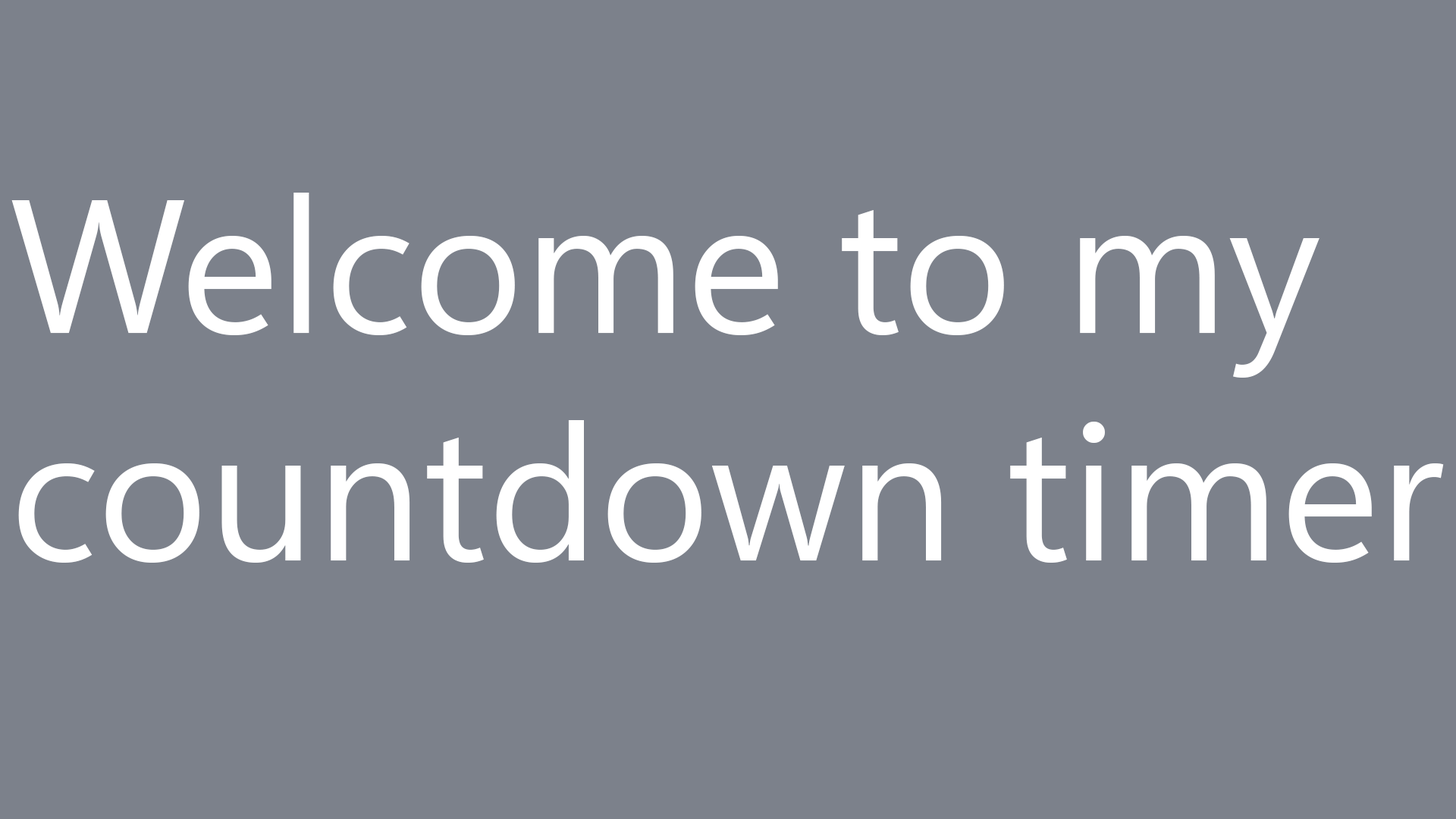
<style>
.page{position:relative;width:1456px;height:819px;background:#7c818b}
.page>*{position:absolute;margin:0}
.t1{font:189.6px "SegoeUIVariable";color:#ffffff}
</style>
<div class="page">
<p class="t1" style="left:11px;top:193px;width:1433px;height:370px">Welcome to my countdown timer</p>
</div>
